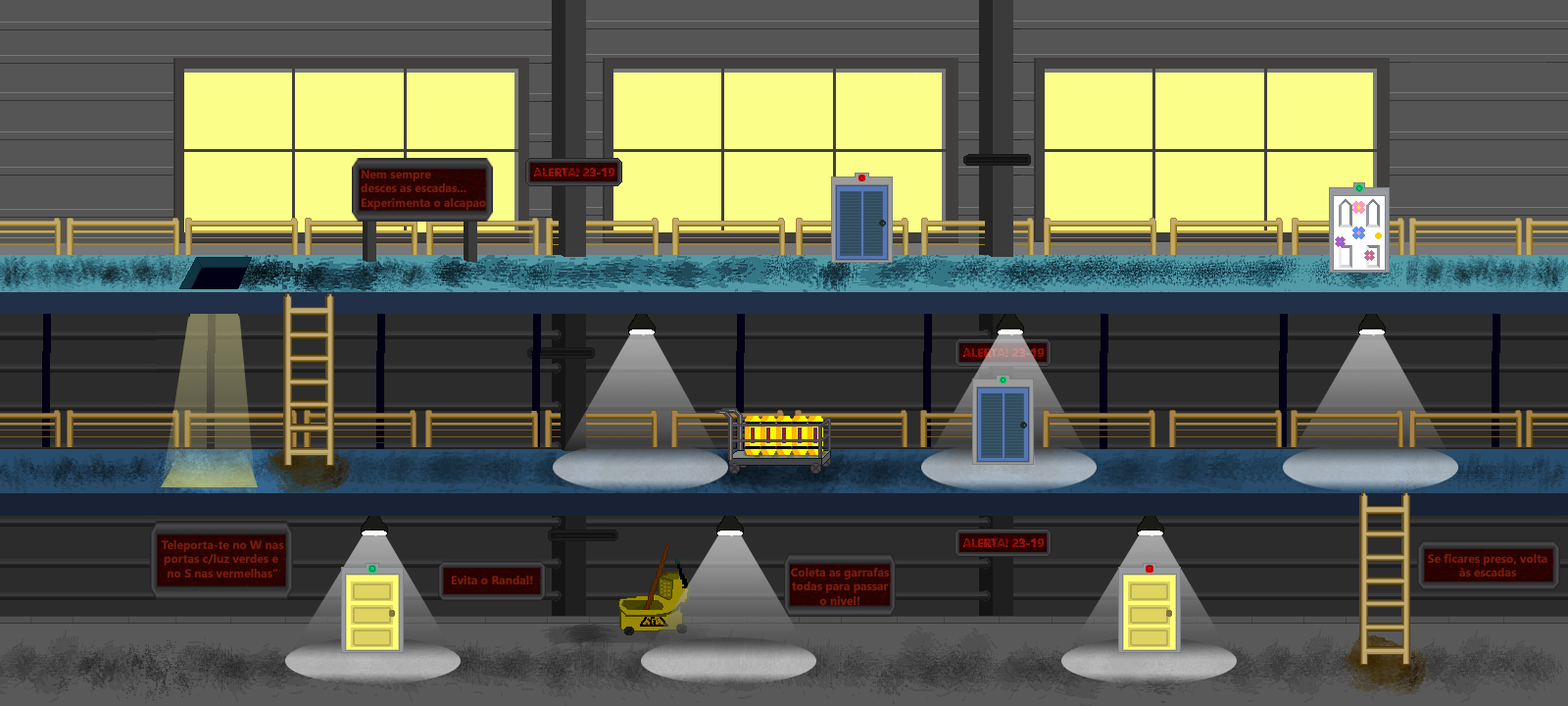
<style>
.page{position:relative;width:1568px;height:706px}
.page>*{position:absolute;margin:0}
.t1{font:11.8px "NirmalaUI-Bold";color:#7a1c0f}
</style>
<div class="page">
<p class="t1" style="left:361px;top:170px;width:125px;height:40px">Nem sempre<br>desces as escadas...<br>Experimenta o alcapao</p>
<p class="t1" style="left:161px;top:540px;width:123px;height:37px;text-align:center">Teleporta-te no W nas<br>portas c/luz verdes e <br>no S nas vermelhas”</p>
<p class="t1" style="left:1428px;top:554px;width:119px;height:22px;text-align:center">Se ficares preso, volta<br>às escadas</p>
<p class="t1" style="left:791px;top:567px;width:98px;height:38px;text-align:center">Coleta as garrafas<br>todas para passar<br>o nivel!</p>
<p class="t1" style="left:452px;top:575px;width:81px;height:9px">Evita o Randal!</p>
</div>
